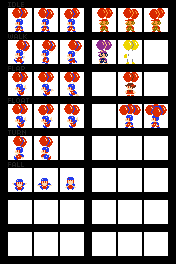
<style>
.page{position:relative;width:176px;height:264px;background:#ffffff}
.page>*{position:absolute;margin:0}
.t1{font:10px "04b03-Ekstended";color:#222222;text-transform:uppercase}
</style>
<div class="page">
<p class="t1" style="left:8px;top:2px;width:16px;height:5px">idle</p>
<p class="t1" style="left:8px;top:34px;width:19px;height:5px">walk</p>
<p class="t1" style="left:8px;top:66px;width:17px;height:5px">flap</p>
<p class="t1" style="left:8px;top:98px;width:21px;height:5px">float</p>
<p class="t1" style="left:8px;top:130px;width:18px;height:5px">turn</p>
<p class="t1" style="left:8px;top:162px;width:16px;height:5px">fall</p>
</div>
